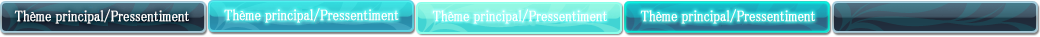
<style>
.page{position:relative;width:1040px;height:37px}
.page>*{position:absolute;margin:0}
.t1{font:15.2px "MS-PMincho";color:#ffffff;font-weight:bold;scale:0.84 1}
</style>
<div class="page">
<p class="t1" style="left:14px;top:9px;width:175px;height:15px">Thème principal/Pressentiment</p>
<p class="t1" style="left:224px;top:8px;width:175px;height:15px">Thème principal/Pressentiment</p>
<p class="t1" style="left:432px;top:9px;width:175px;height:15px">Thème principal/Pressentiment</p>
<p class="t1" style="left:640px;top:9px;width:175px;height:15px">Thème principal/Pressentiment</p>
</div>
